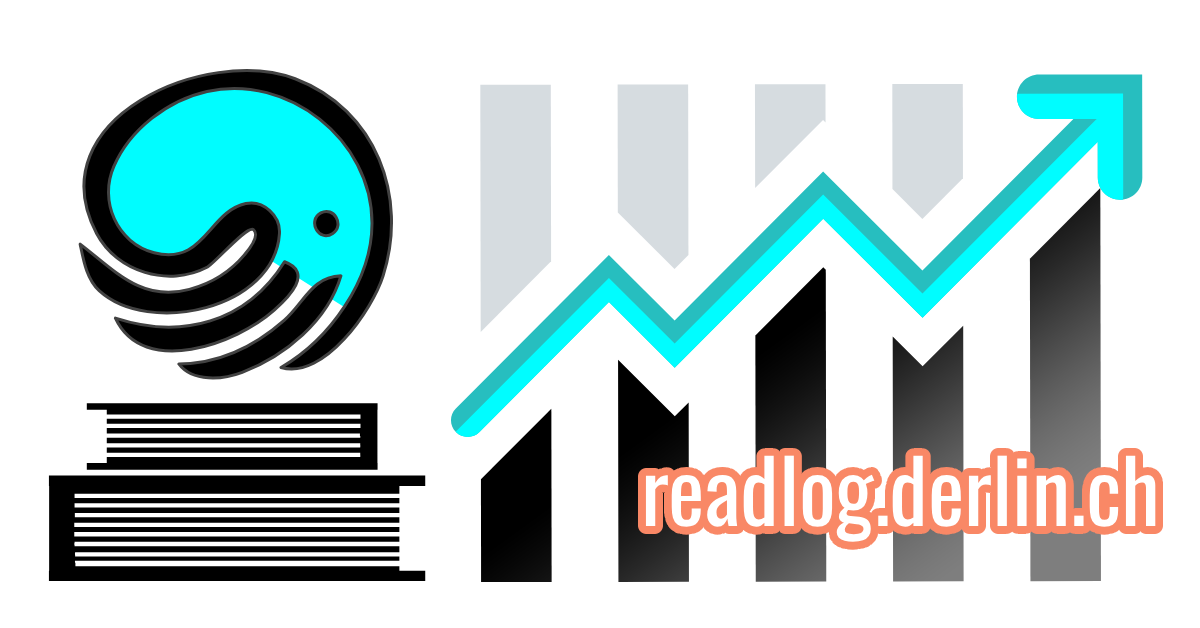
<style>
.page{position:relative;width:1200px;height:628px;background:#ffffff}
.page>*{position:absolute;margin:0}
.t1{font:86.8px "Oswald-Regular";color:#ffffff}
</style>
<div class="page">
<p class="t1" style="left:645px;top:455px;width:511px;height:87px">readlog.derlin.ch</p>
</div>
